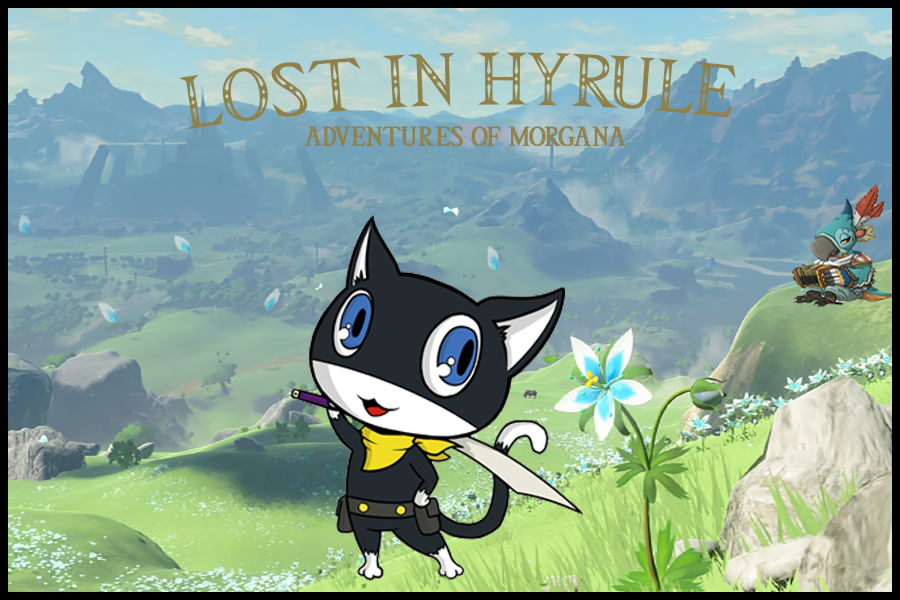
<style>
.page{position:relative;width:900px;height:600px}
.page>*{position:absolute;margin:0}
.t1{font:60px "Triforce";letter-spacing:0.03em;color:#908148;text-transform:uppercase}
.t2{font:22px "Triforce";letter-spacing:0.02em;color:#908148;text-transform:uppercase;font-weight:bold}
</style>
<div class="page">
<p class="t1" style="left:178px;top:52px;width:558px;height:78px">Lost IN HYRULE</p>
<p class="t2" style="left:304px;top:126px;width:323px;height:21px">Adventures of morgana</p>
</div>
